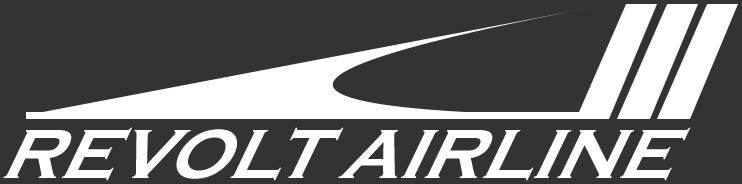
<style>
.page{position:relative;width:742px;height:184px;background:#333333}
.page>*{position:absolute;margin:0}
.t1{font:79.9px "CopperplateGothic-Bold";color:#ffffff;scale:0.9 1}
</style>
<div class="page">
<p class="t1" style="left:3px;top:127px;width:688px;height:54px">REVOLT AIRLINE</p>
</div>
